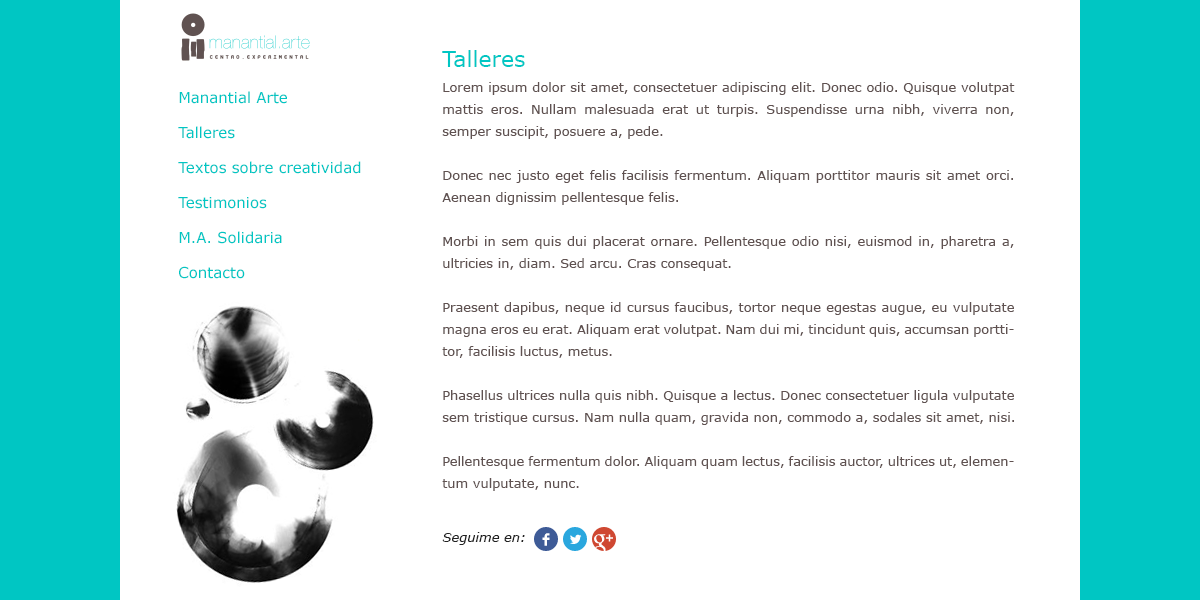
<style>
.page{position:relative;width:1200px;height:600px;background:#ffffff}
.page>*{position:absolute;margin:0}
.t1{font:22px "Verdana";color:#00c6c3}
.t2{font:13px/22px "Verdana";color:#605251}
.t3{font:15px/35px "Verdana";color:#00c6c3}
.t4{font:13px "Verdana-Italic";color:#222222}
</style>
<div class="page">
<p class="t1" style="left:442px;top:50px;width:83px;height:17px">Talleres</p>
<p class="t2" style="left:442px;top:82px;width:573px;height:409px;text-align:justify">Lorem ipsum dolor sit amet, consectetuer adipiscing elit. Donec odio. Quisque volutpat mattis eros. Nullam malesuada erat ut turpis. Suspendisse urna nibh, viverra non, semper suscipit, posuere a, pede.<br><br>Donec nec justo eget felis facilisis fermentum. Aliquam porttitor mauris sit amet orci. Aenean dignissim pellentesque felis.<br><br>Morbi in sem quis dui placerat ornare. Pellentesque odio nisi, euismod in, pharetra a, ultricies in, diam. Sed arcu. Cras consequat.<br><br>Praesent dapibus, neque id cursus faucibus, tortor neque egestas augue, eu vulputate magna eros eu erat. Aliquam erat volutpat. Nam dui mi, tincidunt quis, accumsan porttitor, facilisis luctus, metus.<br><br>Phasellus ultrices nulla quis nibh. Quisque a lectus. Donec consectetuer ligula vulputate sem tristique cursus. Nam nulla quam, gravida non, commodo a, sodales sit amet, nisi.<br><br>Pellentesque fermentum dolor. Aliquam quam lectus, facilisis auctor, ultrices ut, elementum vulputate, nunc.</p>
<p class="t3" style="left:178px;top:91px;width:183px;height:188px;text-align:justify">Manantial Arte<br>Talleres<br>Textos sobre creatividad<br>Testimonios<br>M.A. Solidaria<br>Contacto</p>
<p class="t4" style="left:442px;top:532px;width:83px;height:13px">Seguime en:</p>
</div>
